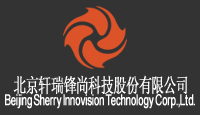
<style>
.page{position:relative;width:200px;height:115px;background:#333333}
.page>*{position:absolute;margin:0}
.t1{font:15px/16.5px "ArialMT";color:#ffffff;font-weight:bold;scale:0.66 1}
.t2{font:19.7px/16.5px "SimSun";color:#ffffff;font-weight:bold;scale:0.66 1}
</style>
<div class="page">
<p class="t1" style="left:5px;top:75px;width:190px;height:34px"><span class="t2">   北京轩瑞锋尚科技股份有限公司<br></span>Beijing Sherry Innovision Technology Corp.,Ltd.</p>
</div>
